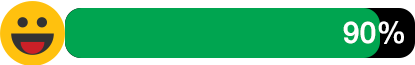
<style>
.page{position:relative;width:415px;height:65px;background:#00a550}
.page>*{position:absolute;margin:0}
.t1{font:30px "HelveticaNeueCyr-Medium";color:#ffffff}
</style>
<div class="page">
<p class="t1" style="left:343px;top:21px;width:61px;height:23px">90%</p>
</div>
